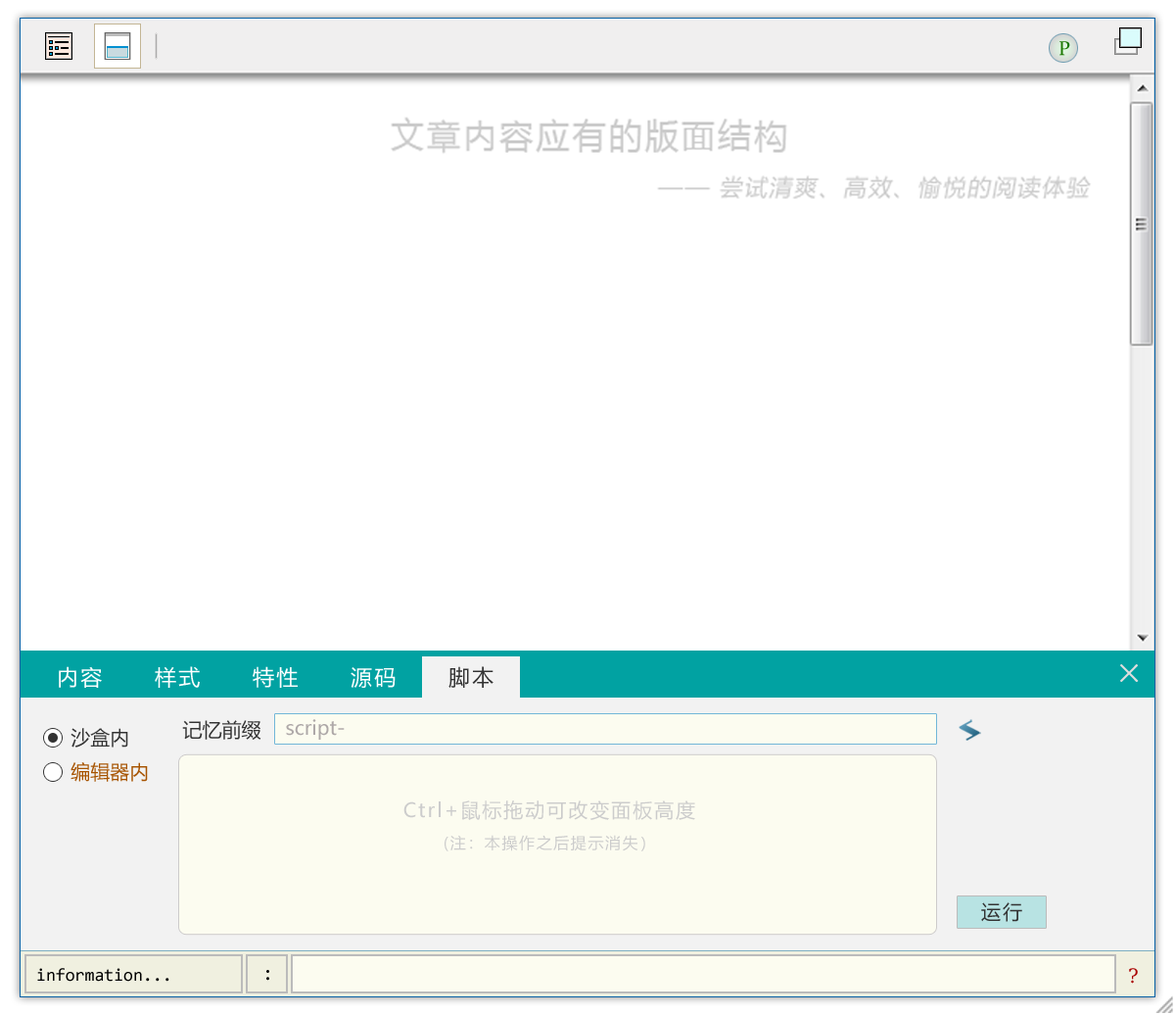
<style>
.page{position:relative;width:1175px;height:1015px;background:#ffffff}
.page>*{position:absolute;margin:0}
.t1{font:19.6px "Constantia";color:#1b7802}
.t2{font:21.5px "MicrosoftYaHei";letter-spacing:0.1em;color:#ffffff}
.t3{font:21.5px "MicrosoftYaHei";letter-spacing:0.1em;color:#333333}
.t4{font:27.4px "NSimSun";letter-spacing:0.1em;color:#dddddd;font-weight:bold}
.t5{font:19.6px "MicrosoftYaHei";color:#333333}
.t6{font:19.6px "MicrosoftYaHei";color:#aea8a8}
.t7{font:19.6px "MicrosoftYaHei";color:#a75401}
.t8{font:19.6px "MicrosoftYaHei";letter-spacing:0.1em;color:#cccccc}
.t9{font:15.7px "MicrosoftYaHei";letter-spacing:0.1em;color:#cccccc}
.t10{font:19.6px "MicrosoftYaHei";letter-spacing:0.1em;color:#333333}
.t11{font:17.6px "Consolas";color:#000000}
.t12{font:19.6px "Consolas";color:#000000}
.t13{font:19.6px "DejaVuSerif";color:#aa0000}
</style>
<div class="page">
<p class="t1" style="left:1060px;top:41px;width:10px;height:15px">P</p>
<p class="t2" style="left:59px;top:666px;width:43px;height:22px">内容</p>
<p class="t2" style="left:155px;top:666px;width:45px;height:22px">样式</p>
<p class="t2" style="left:253px;top:666px;width:45px;height:22px">特性</p>
<p class="t3" style="left:449px;top:666px;width:45px;height:22px">脚本</p>
<p class="t4" style="left:1120px;top:664px;width:19px;height:18px">×</p>
<p class="t2" style="left:351px;top:667px;width:45px;height:21px">源码</p>
<p class="t5" style="left:182px;top:720px;width:79px;height:19px">记忆前缀</p>
<p class="t6" style="left:286px;top:719px;width:59px;height:20px">script-</p>
<p class="t5" style="left:71px;top:728px;width:57px;height:19px">沙盒内</p>
<p class="t7" style="left:71px;top:762px;width:77px;height:20px">编辑器内</p>
<p class="t8" style="left:404px;top:800px;width:291px;height:51px;text-align:center">Ctrl+鼠标拖动可改变面板高度<br><span class="t9">(注：本操作之后提示消失）</span></p>
<p class="t10" style="left:981px;top:902px;width:41px;height:20px">运行</p>
<p class="t11" style="left:37px;top:968px;width:132px;height:13px">information...</p>
<p class="t12" style="left:266px;top:970px;width:3px;height:10px">:</p>
<p class="t13" style="left:1129px;top:968px;width:9px;height:15px">?</p>
</div>
